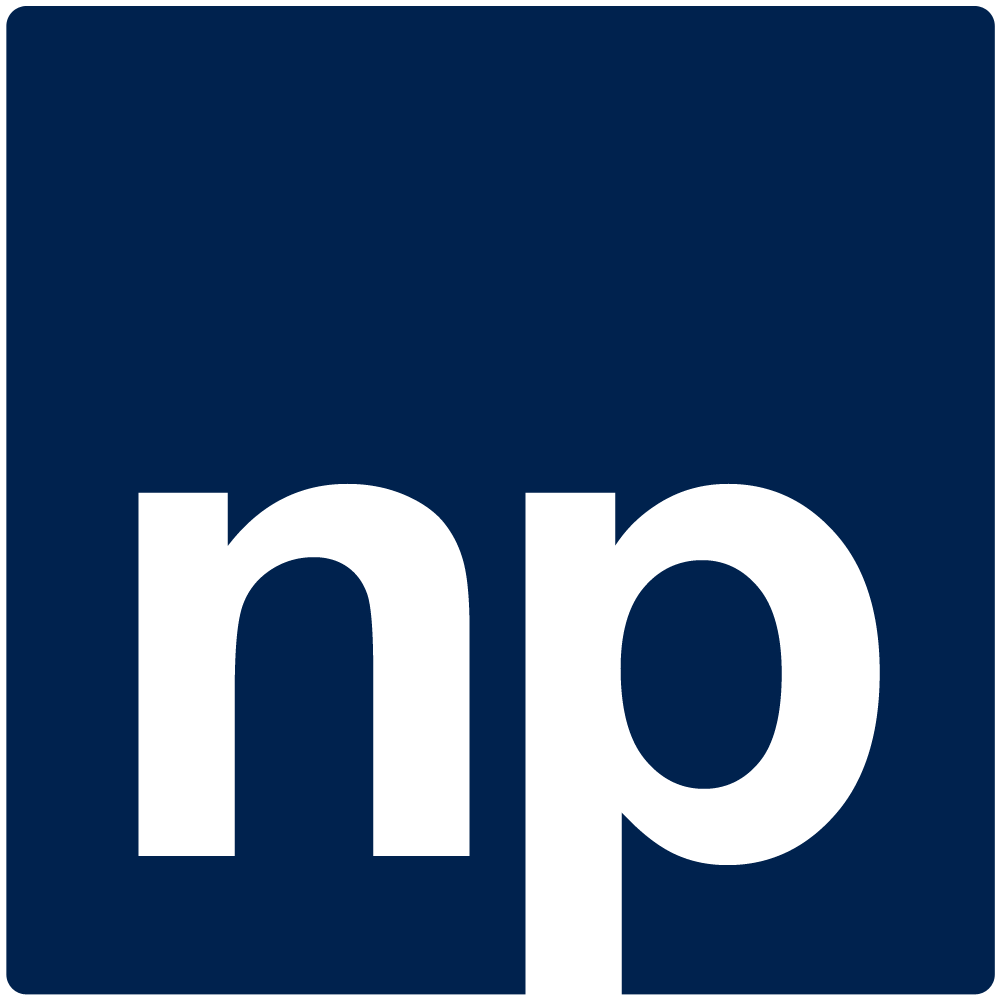
<style>
.page{position:relative;width:1000px;height:1000px;background:#00224e}
.page>*{position:absolute;margin:0}
.t1{font:700px "Arial-BoldMT";color:#ffffff}
</style>
<div class="page">
<p class="t1" style="left:138px;top:483px;width:332px;height:373px">n</p>
<p class="t1" style="left:525px;top:483px;width:355px;height:512px">p</p>
</div>
